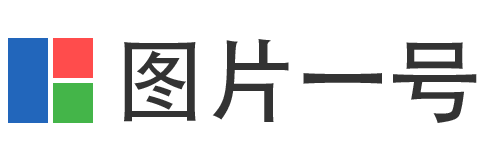
<style>
.page{position:relative;width:500px;height:160px;background:#ffffff}
.page>*{position:absolute;margin:0}
.t1{font:92px "AdobeHeitiStd-Regular";color:#333333}
</style>
<div class="page">
<p class="t1" style="left:124px;top:39px;width:353px;height:84px">图片一号</p>
</div>
